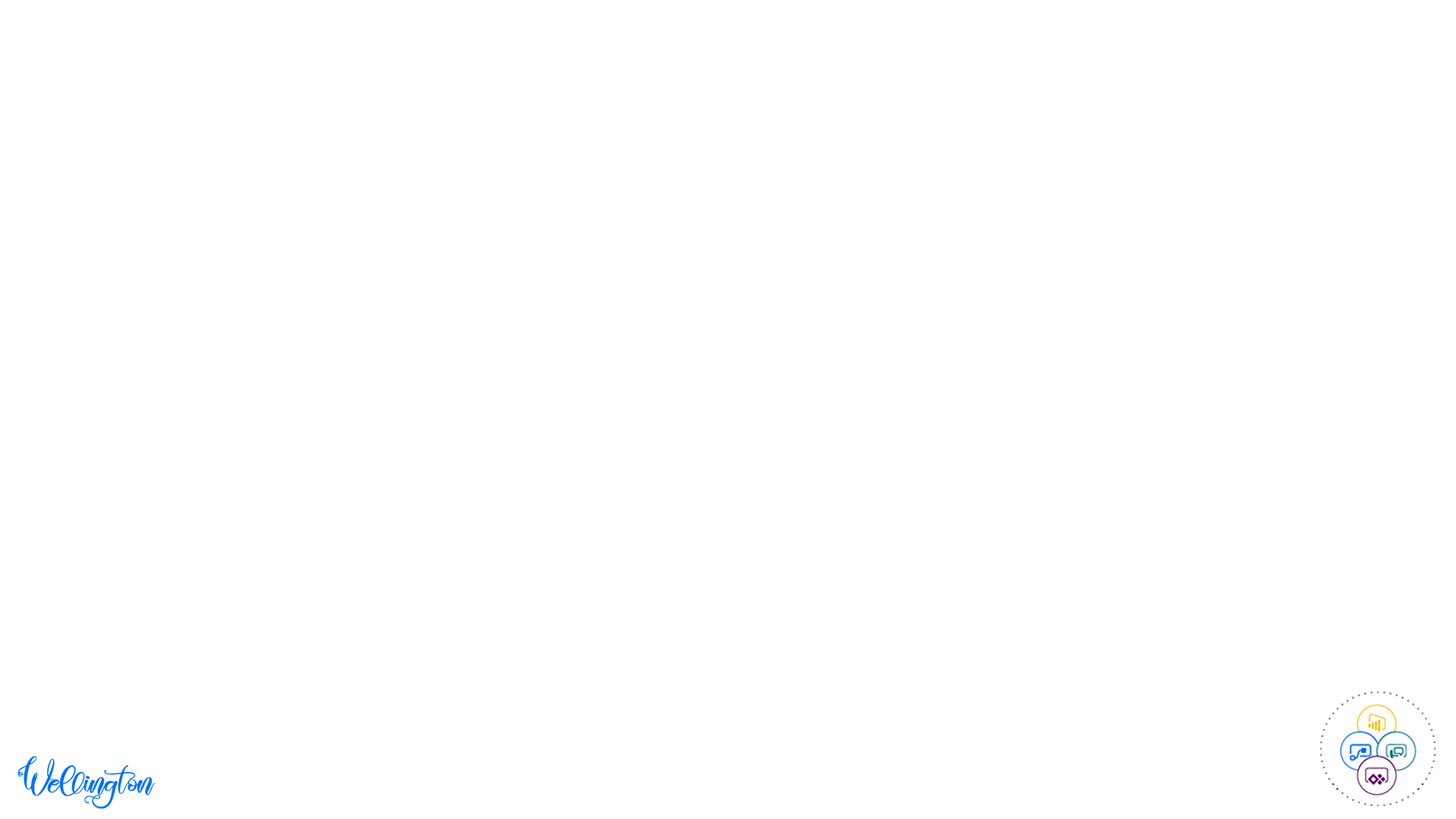
<style>
.page{position:relative;width:1456px;height:819px;background:#ffffff}
.page>*{position:absolute;margin:0}
.t1{font:75.8px "Wellington-Regular";color:#0070ff}
</style>
<div class="page">
<p class="t1" style="left:17px;top:756px;width:138px;height:53px">Wellington</p>
</div>
